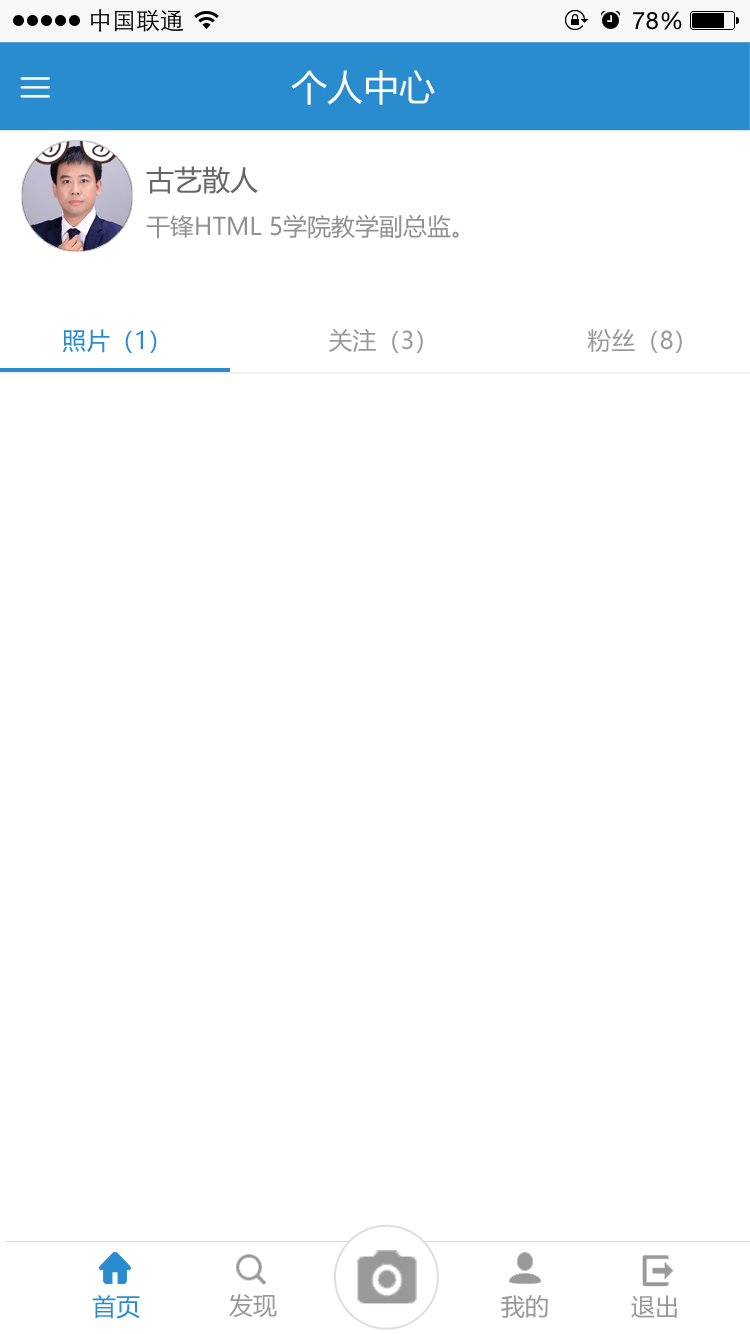
<style>
.page{position:relative;width:750px;height:1334px;background:#ffffff}
.page>*{position:absolute;margin:0}
.t1{font:36px "MicrosoftYaHei";color:#ffffff}
.t2{font:24px/48px "MicrosoftYaHei";color:#919191}
.t3{font:28px/48px "MicrosoftYaHei";color:#666666}
.t4{font:24px "MicrosoftYaHei";color:#999999}
.t5{font:24px "MicrosoftYaHei";color:#298ccf}
</style>
<div class="page">
<p class="t1" style="left:291px;top:70px;width:144px;height:35px">个人中心</p>
<p class="t2" style="left:146px;top:166px;width:313px;height:73px"><span class="t3">古艺散人<br></span>干锋HTML 5学院教学副总监。</p>
<p class="t4" style="left:62px;top:328px;width:620px;height:25px"><span class="t5">照片（1）                      </span>关注（3）                     粉丝（8）</p>
<p class="t5" style="left:92px;top:1295px;width:48px;height:24px">首页</p>
<p class="t4" style="left:229px;top:1294px;width:48px;height:24px">发现</p>
<p class="t4" style="left:501px;top:1295px;width:47px;height:23px">我的</p>
<p class="t4" style="left:631px;top:1295px;width:46px;height:23px">退出</p>
</div>
